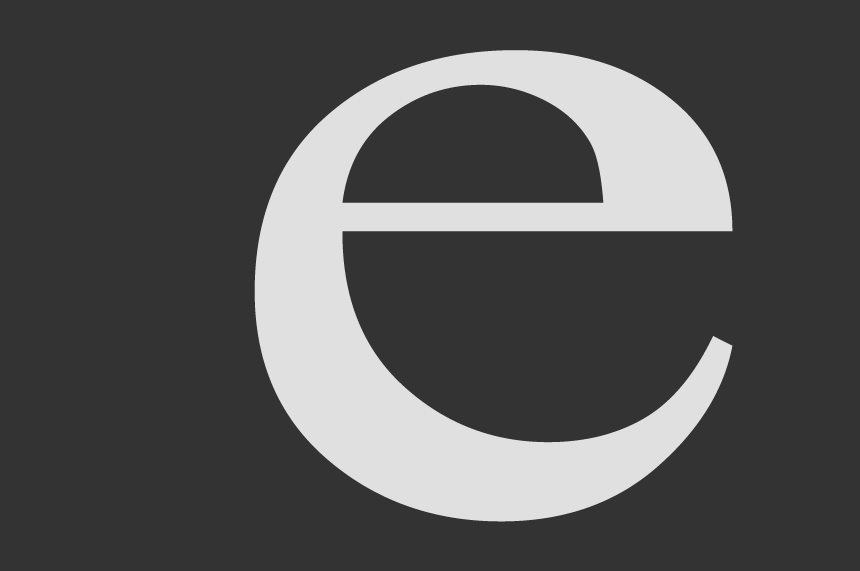
<style>
.page{position:relative;width:860px;height:571px;background:#333333}
.page>*{position:absolute;margin:0}
.t1{font:992.4px "TimesNewRomanPSMT";color:#e0e0e0;scale:1.27 1}
</style>
<div class="page">
<p class="t1" style="left:254px;top:50px;width:479px;height:472px">e</p>
</div>
